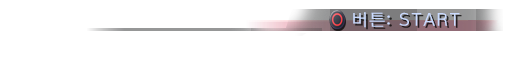
<style>
.page{position:relative;width:512px;height:64px;background:#ffffff}
.page>*{position:absolute;margin:0}
.t1{font:16.7px "KoreanGD13-R";letter-spacing:0.06em;color:#cadbff;scale:1.11 1}
</style>
<div class="page">
<p class="t1" style="left:353px;top:12px;width:107px;height:16px">버튼: START</p>
</div>
